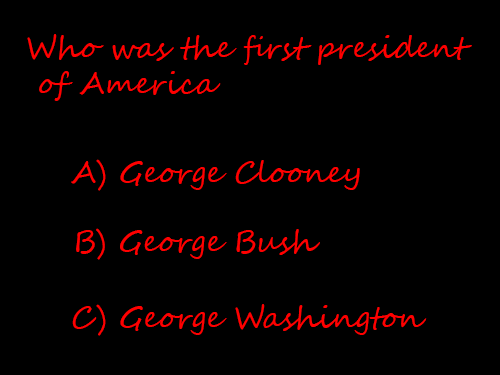
<style>
.page{position:relative;width:500px;height:375px;background:#000000}
.page>*{position:absolute;margin:0}
.t1{font:30px "SegoeScript";color:#ff0000}
</style>
<div class="page">
<p class="t1" style="left:27px;top:34px;width:445px;height:67px">Who was the first president<br> of America</p>
<p class="t1" style="left:71px;top:159px;width:289px;height:32px">A) George Clooney</p>
<p class="t1" style="left:76px;top:228px;width:244px;height:32px">B) George Bush</p>
<p class="t1" style="left:72px;top:304px;width:355px;height:32px">C) George Washington</p>
</div>
